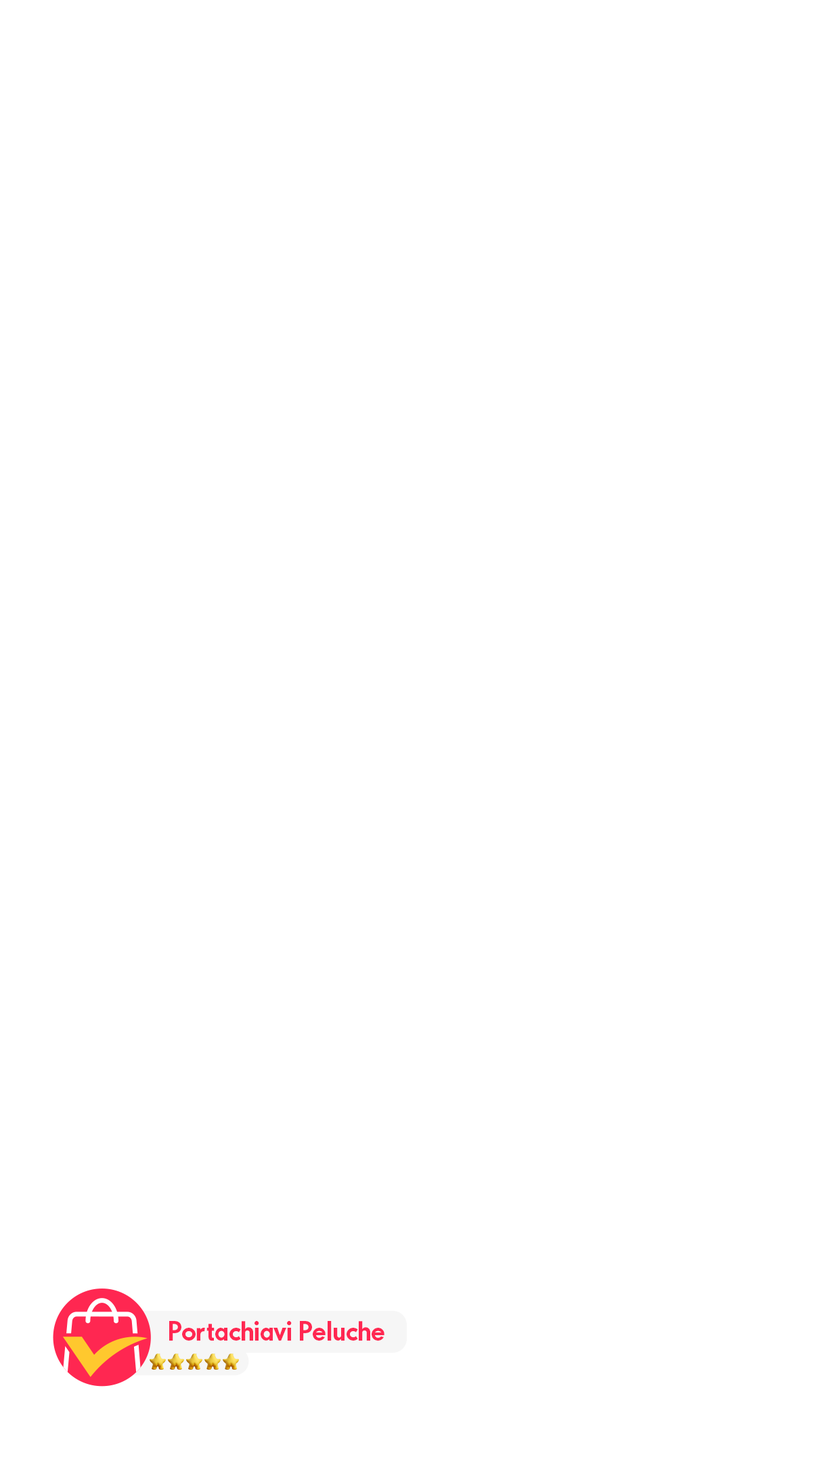
<style>
.page{position:relative;width:819px;height:1457px;background:#ffffff}
.page>*{position:absolute;margin:0}
.t1{font:25.4px "AliExpresssans-Blod";color:#ff2751}
</style>
<div class="page">
<p class="t1" style="left:169px;top:1321px;width:215px;height:19px">Portachiavi Peluche</p>
</div>
